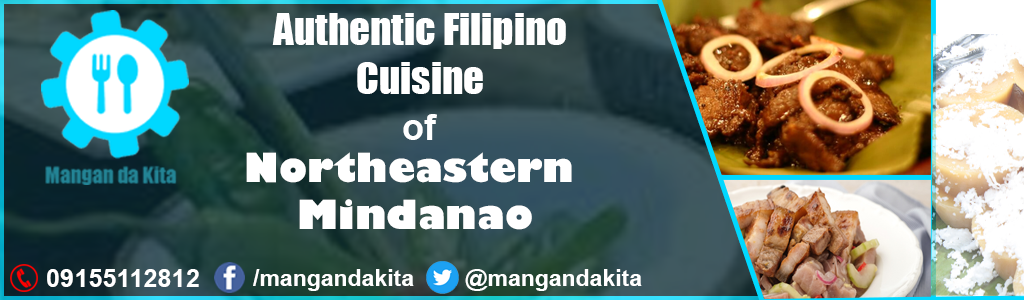
<style>
.page{position:relative;width:1024px;height:300px}
.page>*{position:absolute;margin:0}
.t1{font:40.8px "Impact";color:#ffffff}
.t2{font:36px "Arial-BoldMT";color:#ffffff}
.t3{font:39.2px "GillSans-UltraBold";color:#ffffff}
.t4{font:25.1px "Arial-BoldMT";color:#ffffff}
.t5{font:22.7px "Arial-BoldMT";color:#ffffff}
</style>
<div class="page">
<p class="t1" style="left:272px;top:13px;width:294px;height:81px;text-align:center">Authentic Filipino<br>Cuisine</p>
<p class="t2" style="left:403px;top:114px;width:34px;height:26px">of</p>
<p class="t3" style="left:246px;top:152px;width:326px;height:78px;text-align:center">Northeastern<br> Mindanao</p>
<p class="t4" style="left:47px;top:269px;width:152px;height:18px">09155112812</p>
<p class="t5" style="left:253px;top:269px;width:161px;height:22px">/mangandakita</p>
<p class="t5" style="left:465px;top:269px;width:177px;height:22px">@mangandakita</p>
</div>
